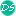
<style>
.page{position:relative;width:16px;height:16px;background:#00b894}
.page>*{position:absolute;margin:0}
.t1{font:10px "MVBoli";color:#ffffff}
</style>
<div class="page">
<p class="t1" style="left:1px;top:4px;width:14px;height:7px">DS</p>
</div>
